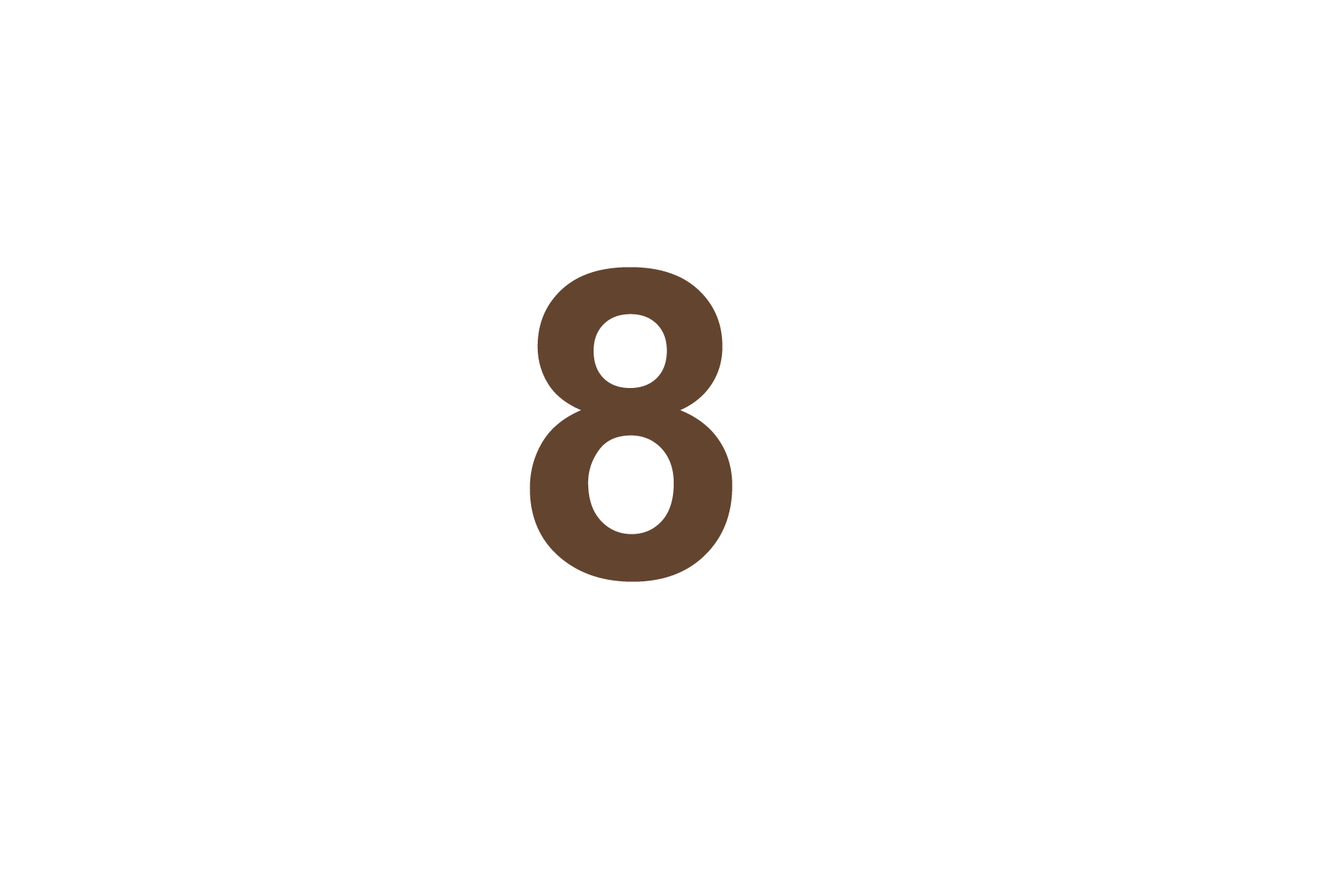
<style>
.page{position:relative;width:1337px;height:892px;background:#ffffff}
.page>*{position:absolute;margin:0}
.t1{font:429.6px "Arial-BoldMT";color:#63442f}
</style>
<div class="page">
<p class="t1" style="left:530px;top:267px;width:203px;height:315px">8</p>
</div>
